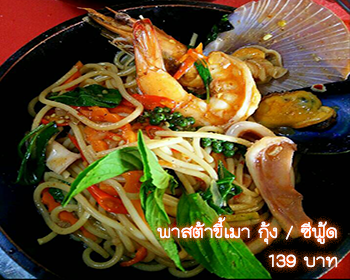
<style>
.page{position:relative;width:350px;height:280px}
.page>*{position:absolute;margin:0}
.t1{font:24px "THKodchasal";color:#ffffff}
</style>
<div class="page">
<p class="t1" style="left:157px;top:217px;width:181px;height:51px">พาสต้าขี้เมา กุ้ง / ซีฟู้ด<br>บาท 139</p>
</div>
